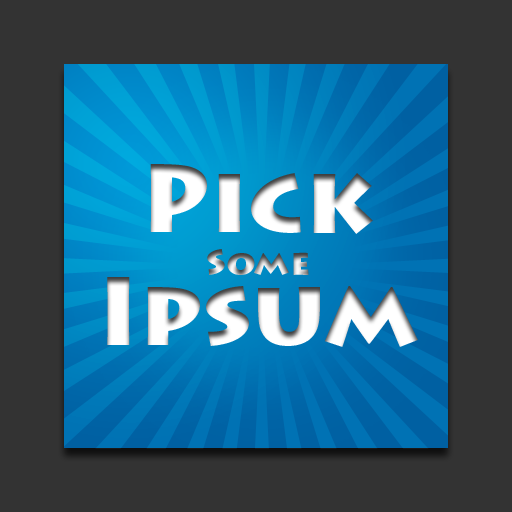
<style>
.page{position:relative;width:512px;height:512px;background:#333333}
.page>*{position:absolute;margin:0}
.t1{font:96px "LithosPro-Black";color:#ffffff}
.t2{font:36px "LithosPro-Black";color:#ffffff}
</style>
<div class="page">
<p class="t1" style="left:107px;top:164px;width:311px;height:183px;text-align:center">Pick<br><span class="t2">Some<br></span>Ipsum</p>
</div>
